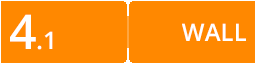
<style>
.page{position:relative;width:256px;height:64px;background:#ff8800}
.page>*{position:absolute;margin:0}
.t1{font:24px "OpenSans-Semibold";color:#ffffff}
.t2{font:48px "OpenSans-Semibold";color:#ffffff}
</style>
<div class="page">
<p class="t1" style="left:10px;top:14px;width:43px;height:36px"><span class="t2">4</span>.1</p>
<p class="t1" style="left:182px;top:23px;width:64px;height:18px">WALL</p>
</div>
